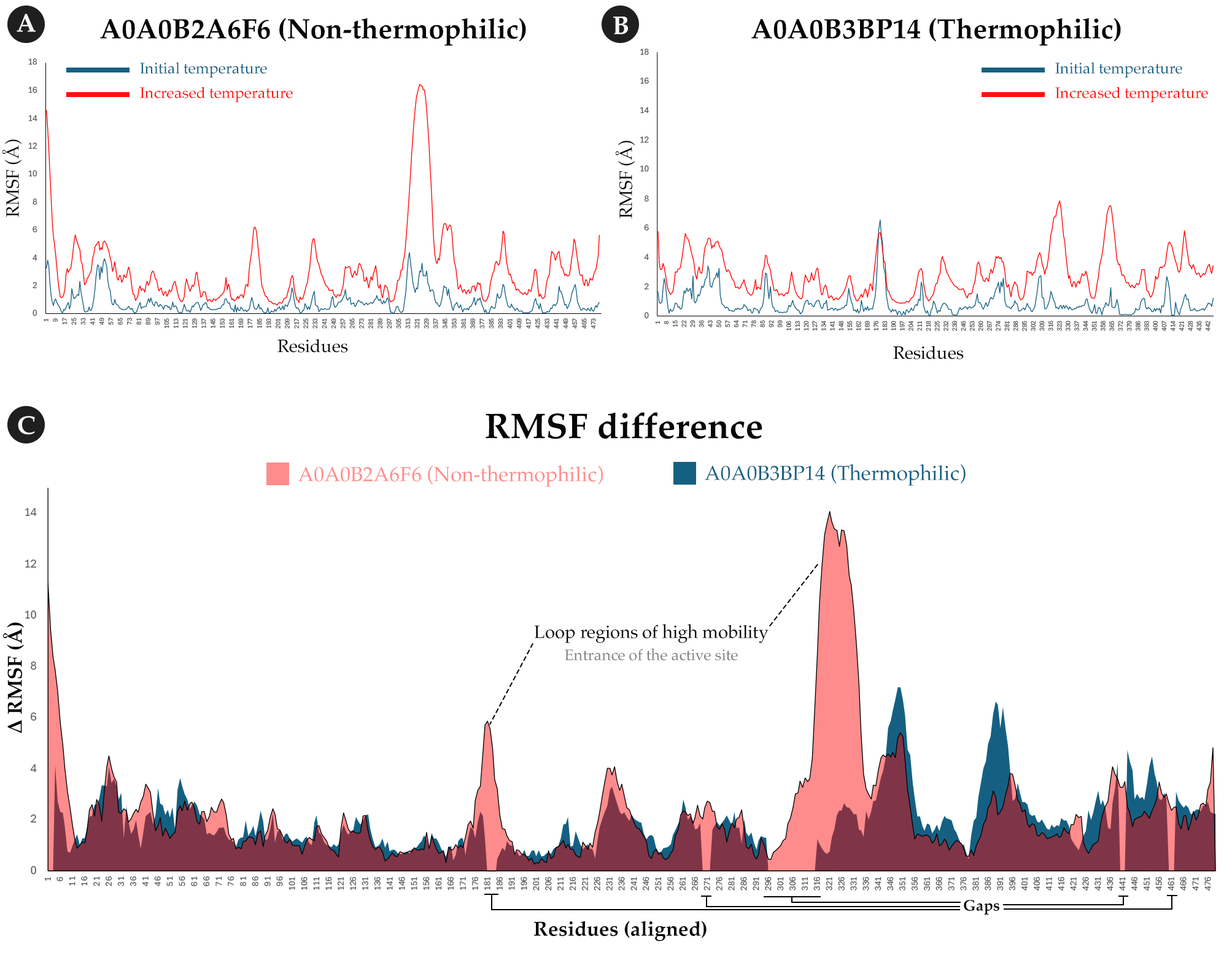
<style>
.page{position:relative;width:1232px;height:968px;background:#ffffff}
.page>*{position:absolute;margin:0}
.t1{font:25.6px "Palatino-Bold";color:#f9f9f9}
.t2{font:28.1px "Palatino-Bold";color:#070707}
.t3{font:15.3px "Palatino-Roman";color:#156082}
.t4{font:15.3px "Palatino-Roman";color:#ff1010}
.t5{font:17.9px "Palatino-Roman";color:#070707}
.t6{font:35.8px "Palatino-Bold";color:#070707}
.t7{font:20.5px "Palatino-Roman";color:#ff8c8c}
.t8{font:20.5px "Palatino-Roman";color:#156082}
.t9{font:20.5px "Palatino-Bold";color:#070707}
.t10{font:15.3px "Palatino-Roman";color:#7f7f7f}
.t11{font:15.3px "Palatino-Bold";color:#070707}
</style>
<div class="page">
<p class="t1" style="left:17px;top:14px;width:19px;height:18px">A</p>
<p class="t2" style="left:100px;top:18px;width:426px;height:28px">A0A0B2A6F6 (Non-thermophilic)</p>
<p class="t1" style="left:613px;top:17px;width:15px;height:17px">B</p>
<p class="t2" style="left:752px;top:18px;width:369px;height:28px">A0A0B3BP14 (Thermophilic)</p>
<p class="t3" style="left:140px;top:62px;width:127px;height:16px">Initial temperature</p>
<p class="t3" style="left:1055px;top:62px;width:128px;height:16px">Initial temperature</p>
<p class="t4" style="left:140px;top:87px;width:153px;height:16px">Increased temperature</p>
<p class="t4" style="left:1055px;top:87px;width:153px;height:16px">Increased temperature</p>
<p class="t5" style="left:2px;top:139px;width:20px;height:78px;rotate:-90deg">RMSF (Å)</p>
<p class="t5" style="left:615px;top:141px;width:20px;height:78px;rotate:-90deg">RMSF (Å)</p>
<p class="t5" style="left:278px;top:339px;width:70px;height:13px">Residues</p>
<p class="t5" style="left:893px;top:346px;width:71px;height:13px">Residues</p>
<p class="t6" style="left:486px;top:412px;width:277px;height:27px">RMSF difference</p>
<p class="t1" style="left:18px;top:416px;width:17px;height:19px">C</p>
<p class="t7" style="left:298px;top:465px;width:306px;height:22px">A0A0B2A6F6 (Non-thermophilic)</p>
<p class="t8" style="left:705px;top:464px;width:261px;height:22px">A0A0B3BP14 (Thermophilic)</p>
<p class="t9" style="left:3px;top:622px;width:21px;height:111px;rotate:-90deg">Δ RMSF (Å)</p>
<p class="t5" style="left:534px;top:624px;width:235px;height:19px">Loop regions of high mobility</p>
<p class="t10" style="left:565px;top:648px;width:173px;height:13px">Entrance of the active site</p>
<p class="t11" style="left:964px;top:900px;width:36px;height:14px">Gaps</p>
<p class="t9" style="left:534px;top:920px;width:173px;height:21px">Residues (aligned)</p>
</div>
